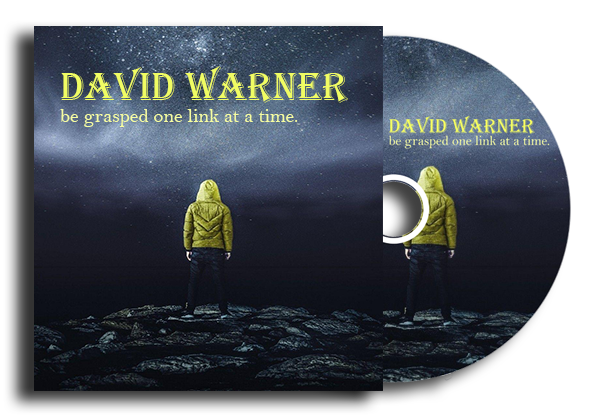
<style>
.page{position:relative;width:597px;height:419px}
.page>*{position:absolute;margin:0}
.t1{font:40px "Algerian";color:#f0fc63}
.t2{font:20px "BellMT";color:#f6fda1}
.t3{font:20.4px "Algerian"}
.t4{font:13.6px "BellMT"}
</style>
<div class="page">
<p class="t1" style="left:61px;top:66px;width:287px;height:37px">David Warner</p>
<p class="t2" style="left:60px;top:109px;width:238px;height:18px">be grasped one link at a time.</p>
<p class="t3" style="left:388px;top:116px;width:147px;height:19px">David Warner</p>
<p class="t4" style="left:388px;top:136px;width:162px;height:12px">be grasped one link at a time.</p>
</div>
